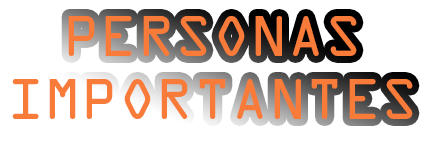
<style>
.page{position:relative;width:425px;height:142px;background:#ffffff}
.page>*{position:absolute;margin:0}
.t1{font:52px "OCRAStd";color:#f87b3a}
</style>
<div class="page">
<p class="t1" style="left:12px;top:16px;width:401px;height:103px;text-align:center">PERSONAS<br>IMPORTANTES</p>
</div>
